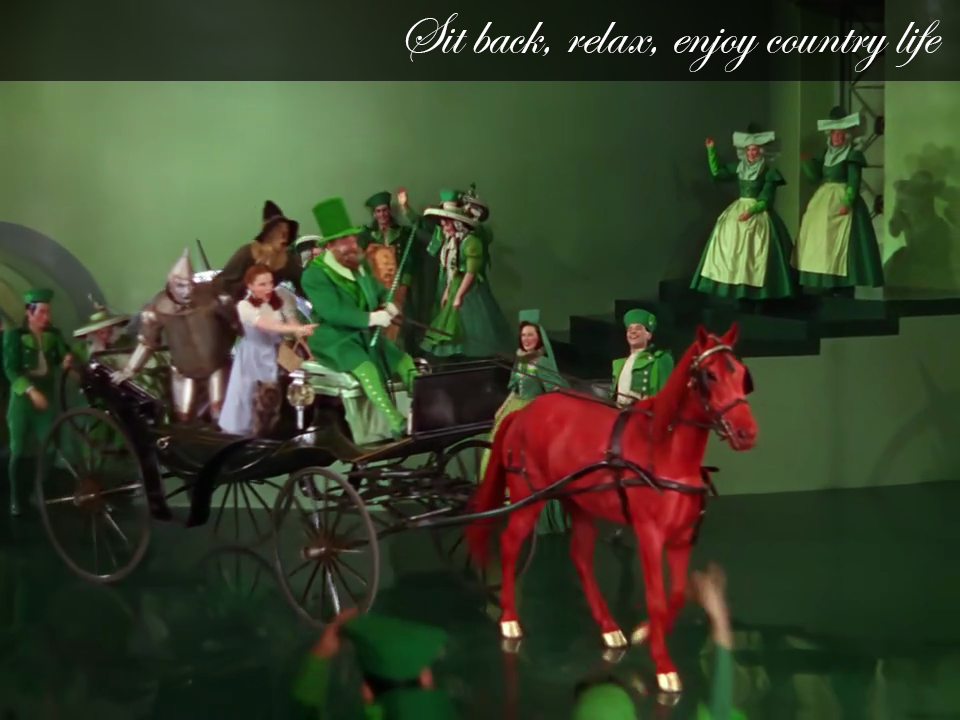
<style>
.page{position:relative;width:960px;height:720px}
.page>*{position:absolute;margin:0}
.t1{font:60px "EdwardianScriptITC";color:#ffffff}
</style>
<div class="page">
<p class="t1" style="left:405px;top:13px;width:538px;height:59px">Sit back, relax, enjoy country life</p>
</div>
